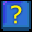
<style>
.page{position:relative;width:32px;height:32px;background:#2e71d5}
.page>*{position:absolute;margin:0}
.t1{font:24px "Verdana";color:#fff600}
</style>
<div class="page">
<p class="t1" style="left:11px;top:5px;width:11px;height:19px">?</p>
</div>
